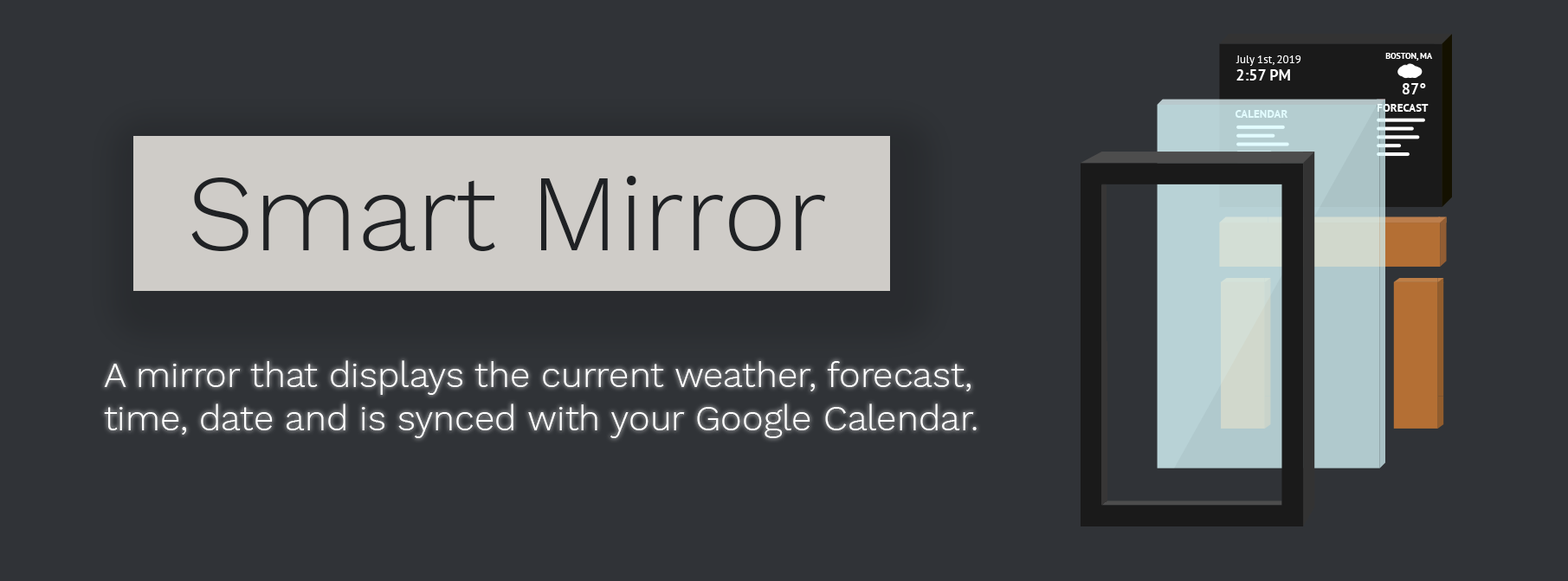
<style>
.page{position:relative;width:1568px;height:581px;background:#303337}
.page>*{position:absolute;margin:0}
.t1{font:108.2px "WorkSans-Light";color:#303337}
.t2{font:36.1px "WorkSans-Light";color:#ffffff}
</style>
<div class="page">
<p class="t1" style="left:191px;top:176px;width:635px;height:75px">Smart Mirror</p>
<p class="t2" style="left:104px;top:360px;width:873px;height:78px">A mirror that displays the current weather, forecast,<br>time, date and is synced with your Google Calendar.</p>
</div>
